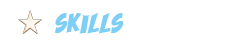
<style>
.page{position:relative;width:250px;height:45px;background:#ffffff}
.page>*{position:absolute;margin:0}
.t1{font:30px "HoustonComicsPersonalUse";color:#7ecef6}
</style>
<div class="page">
<p class="t1" style="left:55px;top:13px;width:69px;height:21px">SKILLS</p>
</div>
